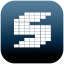
<style>
.page{position:relative;width:64px;height:64px}
.page>*{position:absolute;margin:0}
.t1{font:60px "Loudnoise";color:#ffffff}
</style>
<div class="page">
<p class="t1" style="left:14px;top:12px;width:37px;height:36px">s</p>
</div>
